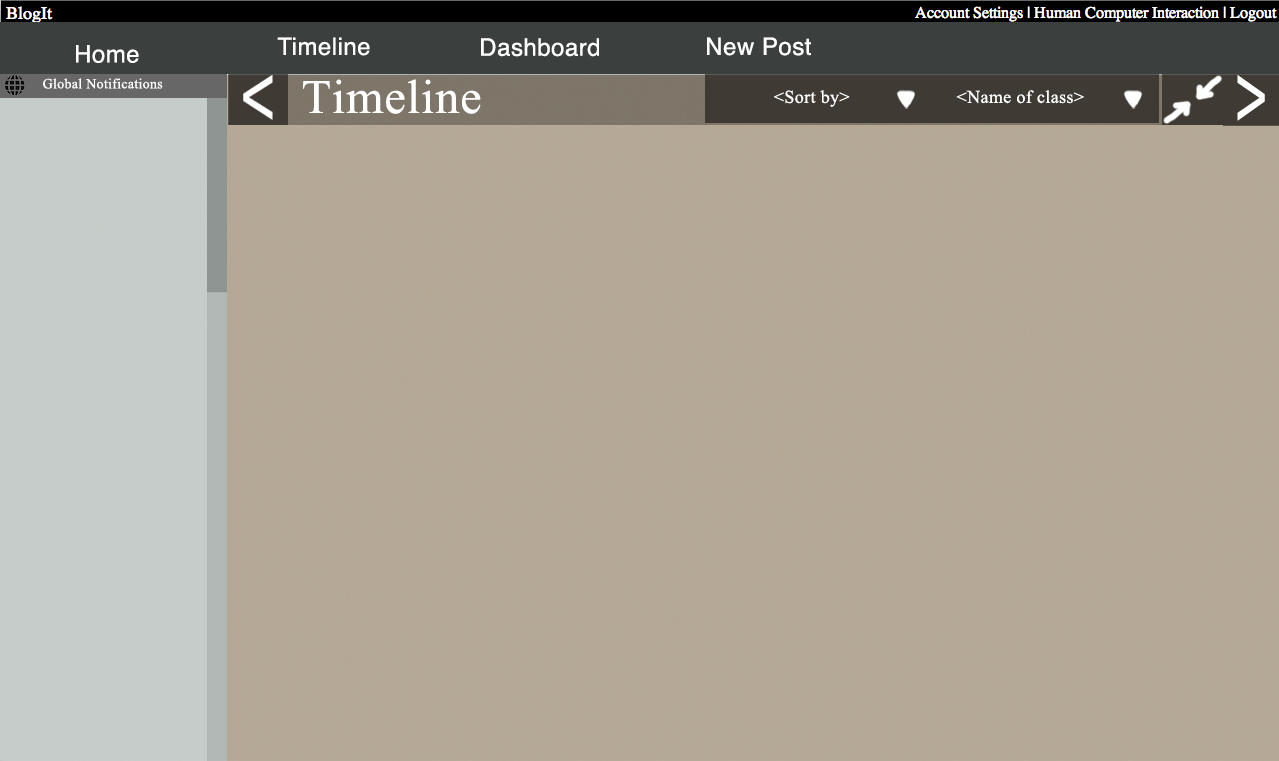
<style>
.page{position:relative;width:1279px;height:761px;background:#b4a996}
.page>*{position:absolute;margin:0}
.t1{font:24px "Helvetica";letter-spacing:0.02em;color:#ffffff}
.t2{font:14px "TimesNewRomanPSMT";letter-spacing:0.02em;color:#ffffff}
.t3{font:48px "TimesNewRomanPSMT";letter-spacing:0.02em;color:#ffffff}
.t4{font:18px "TimesNewRomanPSMT";letter-spacing:0.02em;color:#ffffff}
</style>
<div class="page">
<p class="t1" style="left:277px;top:37px;width:93px;height:19px">Timeline</p>
<p class="t1" style="left:481px;top:38px;width:118px;height:19px">Dashboard</p>
<p class="t1" style="left:707px;top:37px;width:104px;height:19px">New Post</p>
<p class="t1" style="left:76px;top:45px;width:63px;height:18px">Home</p>
<p class="t2" style="left:43px;top:78px;width:120px;height:11px">Global Notifications</p>
<p class="t3" style="left:303px;top:79px;width:178px;height:35px">Timeline</p>
<p class="t4" style="left:774px;top:90px;width:76px;height:17px">&lt;Sort by&gt;</p>
<p class="t4" style="left:956px;top:90px;width:128px;height:14px">&lt;Name of class&gt;</p>
</div>
